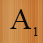
<style>
.page{position:relative;width:43px;height:43px}
.page>*{position:absolute;margin:0}
.t1{font:30px "TimesNewRomanPSMT";color:#0c0c0b}
.t2{font:12px "TimesNewRomanPSMT";color:#0c0c0b}
</style>
<div class="page">
<p class="t1" style="left:10px;top:9px;width:22px;height:20px">A</p>
<p class="t2" style="left:34px;top:27px;width:4px;height:9px">1</p>
</div>
